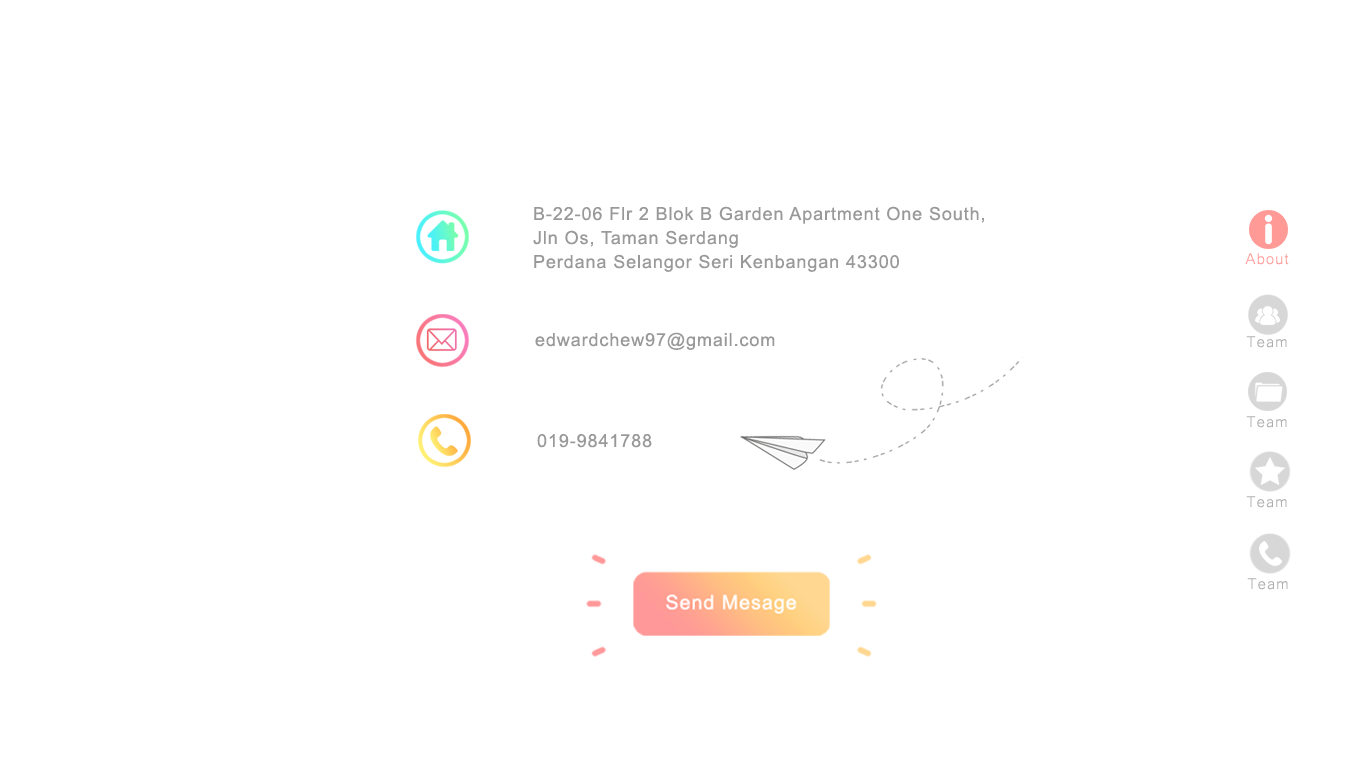
<style>
.page{position:relative;width:1366px;height:768px;background:#ffffff}
.page>*{position:absolute;margin:0}
.t1{font:18px/24px "ArialMT";letter-spacing:0.05em;color:#999999}
.t2{font:20px "Microsoft-Yi-Baiti";letter-spacing:0.05em;color:#ff9a97}
.t3{font:18px "ArialMT";letter-spacing:0.05em;color:#999999}
.t4{font:20px "Microsoft-Yi-Baiti";letter-spacing:0.05em;color:#aeaeae}
</style>
<div class="page">
<p class="t1" style="left:533px;top:206px;width:451px;height:66px">B-22-06 Flr 2 Blok B Garden Apartment One South,<br>Jln Os, Taman Serdang <br>Perdana Selangor Seri Kenbangan 43300</p>
<p class="t2" style="left:1245px;top:253px;width:44px;height:12px">About</p>
<p class="t3" style="left:535px;top:332px;width:240px;height:18px">edwardchew97@gmail.com</p>
<p class="t4" style="left:1246px;top:336px;width:41px;height:12px">Team</p>
<p class="t4" style="left:1246px;top:416px;width:41px;height:12px">Team</p>
<p class="t3" style="left:537px;top:434px;width:115px;height:14px">019-9841788</p>
<p class="t4" style="left:1246px;top:496px;width:41px;height:12px">Team</p>
<p class="t4" style="left:1247px;top:578px;width:41px;height:12px">Team</p>
</div>
